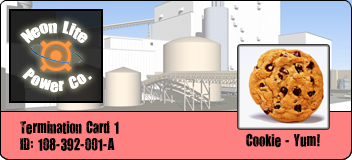
<style>
.page{position:relative;width:352px;height:160px;background:#ff8080}
.page>*{position:absolute;margin:0}
.t1{font:14px "YouAreLoved";color:#000000}
</style>
<div class="page">
<p class="t1" style="left:20px;top:120px;width:99px;height:31px">Termination Card 1<br>ID: 108-392-001-A</p>
<p class="t1" style="left:246px;top:133px;width:74px;height:15px">Cookie - Yum!</p>
</div>
